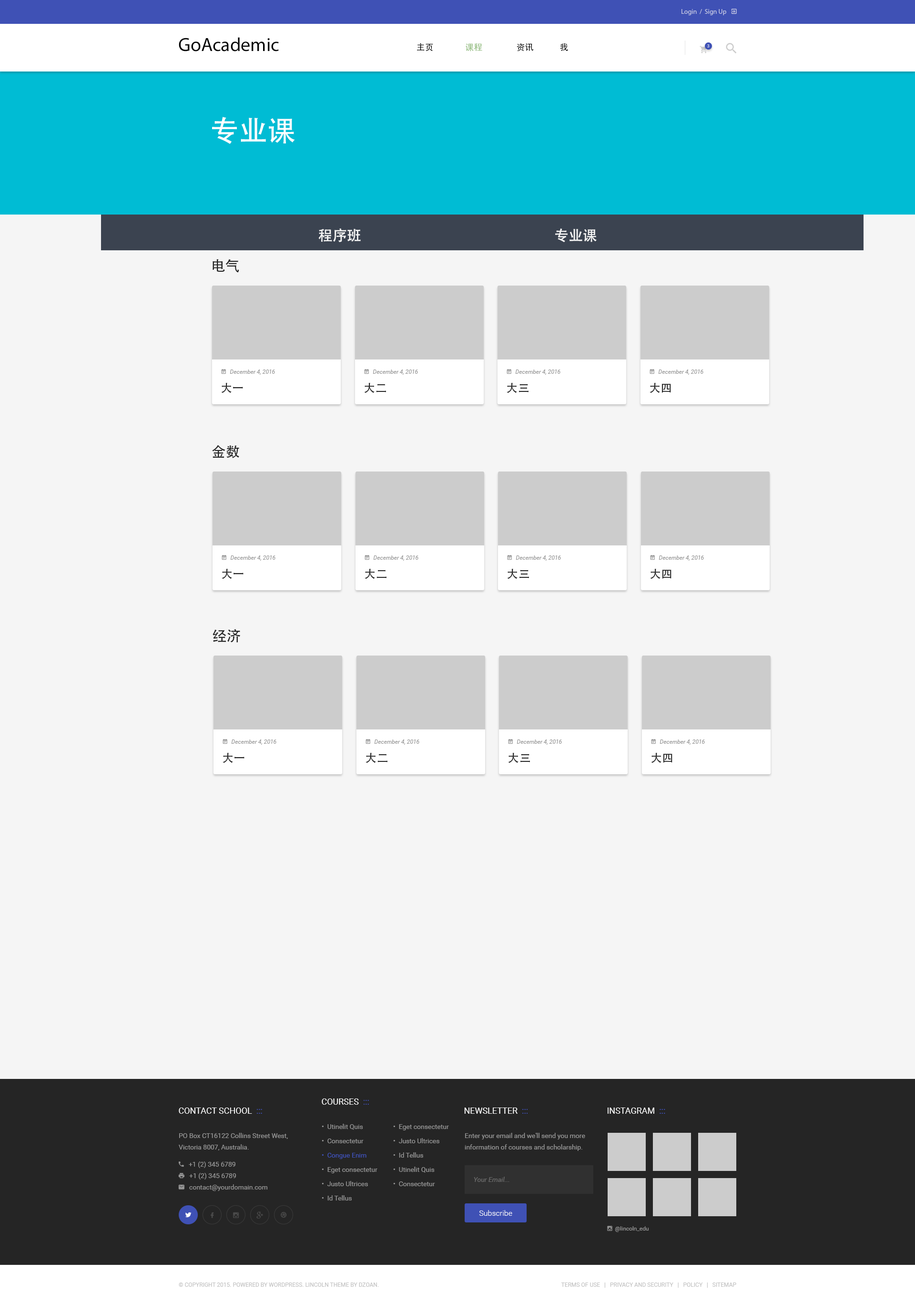
<style>
.page{position:relative;width:915px;height:1303px;background:#f5f5f5}
.page>*{position:absolute;margin:0}
.t1{font:19.1px "MyriadPro-Regular";color:#000000}
.t2{font:8.6px "AdobeHeitiStd-Regular";color:#000000}
.t3{font:8.6px "AdobeHeitiStd-Regular";color:#87b672}
.t4{font:4.3px "Roboto-Regular";text-transform:uppercase}
.t5{font:28.6px "AdobeHeitiStd-Regular";color:#ffffff}
.t6{font:14.3px "AdobeHeitiStd-Regular";color:#f5f5f5}
.t7{font:14.3px "AdobeHeitiStd-Regular";color:#252525}
.t8{font:11.4px "AdobeHeitiStd-Regular";color:#252525}
.t9{font:8.6px "Roboto-Regular";color:#ffffff;text-transform:uppercase}
.t10{font:8.6px "Roboto-Regular";color:#3f51b5;text-transform:uppercase}
.t11{font:6.7px/14.3px "Roboto-Regular";color:#959595}
.t12{font:6.7px/14.3px "Roboto-Regular";color:#3f51b5}
.t13{font:6.7px/11.4px "Roboto-Regular";color:#959595}
.t14{font:6.7px "Roboto-Italic";color:#6c6c6c}
.t15{font:7.6px "Roboto-Light";color:#ffffff}
.t16{font:5.7px "Roboto-Regular";color:#c2c2c2;text-transform:uppercase}
</style>
<div class="page">
<p class="t1" style="left:179px;top:37px;width:100px;height:14px">GoAcademic</p>
<p class="t2" style="left:417px;top:43px;width:16px;height:8px">主页</p>
<p class="t3" style="left:466px;top:43px;width:16px;height:8px">课程</p>
<p class="t2" style="left:517px;top:43px;width:17px;height:8px">资讯</p>
<p class="t2" style="left:560px;top:43px;width:8px;height:8px">我</p>
<p class="t4" style="left:707px;top:44px;width:3px;height:4px">3</p>
<p class="t5" style="left:212px;top:117px;width:83px;height:27px">专业课</p>
<p class="t6" style="left:318px;top:228px;width:43px;height:14px">程序班</p>
<p class="t6" style="left:555px;top:228px;width:42px;height:14px">专业课</p>
<p class="t7" style="left:213px;top:259px;width:26px;height:14px">电气</p>
<p class="t8" style="left:221px;top:383px;width:22px;height:10px">大一</p>
<p class="t8" style="left:364px;top:383px;width:22px;height:10px">大二</p>
<p class="t8" style="left:507px;top:383px;width:22px;height:10px">大三</p>
<p class="t8" style="left:650px;top:383px;width:21px;height:10px">大四</p>
<p class="t7" style="left:212px;top:445px;width:27px;height:13px">金数</p>
<p class="t8" style="left:222px;top:569px;width:22px;height:10px">大一</p>
<p class="t8" style="left:365px;top:569px;width:22px;height:10px">大二</p>
<p class="t8" style="left:507px;top:569px;width:22px;height:10px">大三</p>
<p class="t8" style="left:650px;top:569px;width:22px;height:10px">大四</p>
<p class="t7" style="left:213px;top:629px;width:27px;height:14px">经济</p>
<p class="t8" style="left:223px;top:753px;width:22px;height:10px">大一</p>
<p class="t8" style="left:366px;top:753px;width:22px;height:10px">大二</p>
<p class="t8" style="left:508px;top:753px;width:22px;height:10px">大三</p>
<p class="t8" style="left:651px;top:753px;width:22px;height:10px">大四</p>
<p class="t9" style="left:179px;top:1107px;width:83px;height:7px">Contact School  <span class="t10">:::</span></p>
<p class="t9" style="left:322px;top:1098px;width:47px;height:7px">Courses  <span class="t10">:::</span></p>
<p class="t9" style="left:464px;top:1107px;width:64px;height:7px">Newsletter  <span class="t10">:::</span></p>
<p class="t9" style="left:608px;top:1107px;width:57px;height:7px">Instagram  <span class="t10">:::</span></p>
<p class="t11" style="left:322px;top:1124px;width:56px;height:76px">•  Utinelit Quis<br>•  Consectetur<br><span class="t12">•  Congue Enim<br></span>•  Eget consectetur<br>•  Justo Ultrices<br>•  Id Tellus</p>
<p class="t11" style="left:393px;top:1124px;width:56px;height:62px">•  Eget consectetur<br>•  Justo Ultrices<br>•  Id Tellus<br>•  Utinelit Quis<br>•  Consectetur</p>
<p class="t13" style="left:465px;top:1133px;width:120px;height:18px">Enter your email and we'll send you more information of courses and scholarship.</p>
<p class="t14" style="left:474px;top:1176px;width:36px;height:6px">Your Email...</p>
<p class="t15" style="left:479px;top:1210px;width:33px;height:6px">Subscribe</p>
<p class="t16" style="left:179px;top:1282px;width:200px;height:5px">© Copyright 2015. Powered by WordPress. Lincoln Theme by DZOAN.</p>
<p class="t16" style="left:561px;top:1282px;width:176px;height:6px">Terms of Use   |   Privacy and Security   |   Policy   |   Sitemap</p>
</div>
